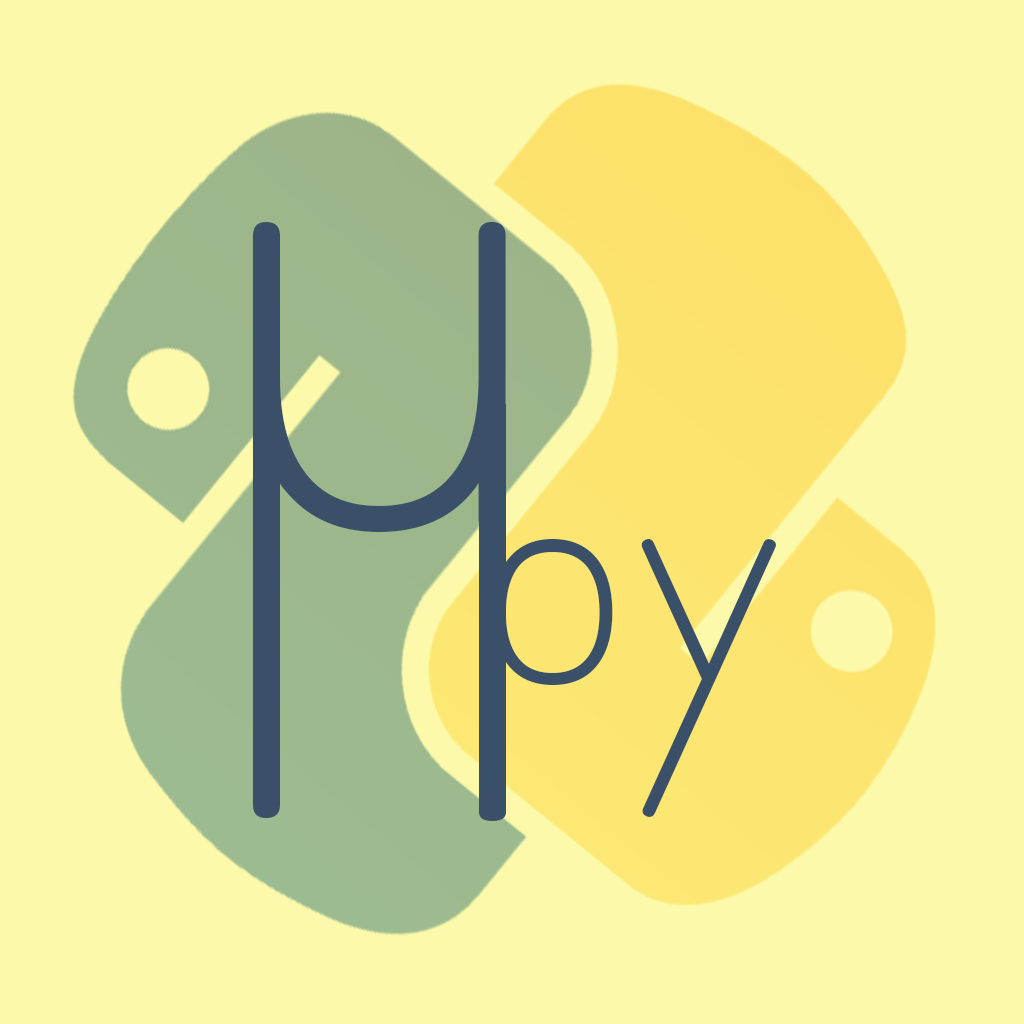
<style>
.page{position:relative;width:1024px;height:1024px;background:#fcfaaa}
.page>*{position:absolute;margin:0}
.t1{font:1200px "SimplePrint-Regular";color:#3a5069}
.t2{font:828px "SimplePrint-Regular";color:#3a5069;scale:1.45 1}
.t3{font:566px "SimplePrint-Regular";color:#3a5069}
</style>
<div class="page">
<p class="t1" style="left:252px;top:222px;width:254px;height:596px">μ</p>
<p class="t2" style="left:479px;top:398px;width:27px;height:423px">l</p>
<p class="t3" style="left:493px;top:539px;width:283px;height:278px">py</p>
</div>
